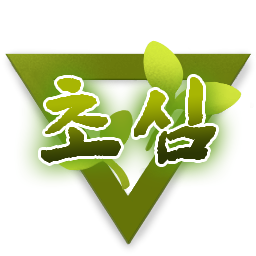
<style>
.page{position:relative;width:256px;height:256px;background:#ffffff}
.page>*{position:absolute;margin:0}
.t1{font:98.8px "SangSangRockOTF";letter-spacing:0.12em;scale:1.08 1}
</style>
<div class="page">
<p class="t1" style="left:42px;top:78px;width:173px;height:85px">초심</p>
</div>
